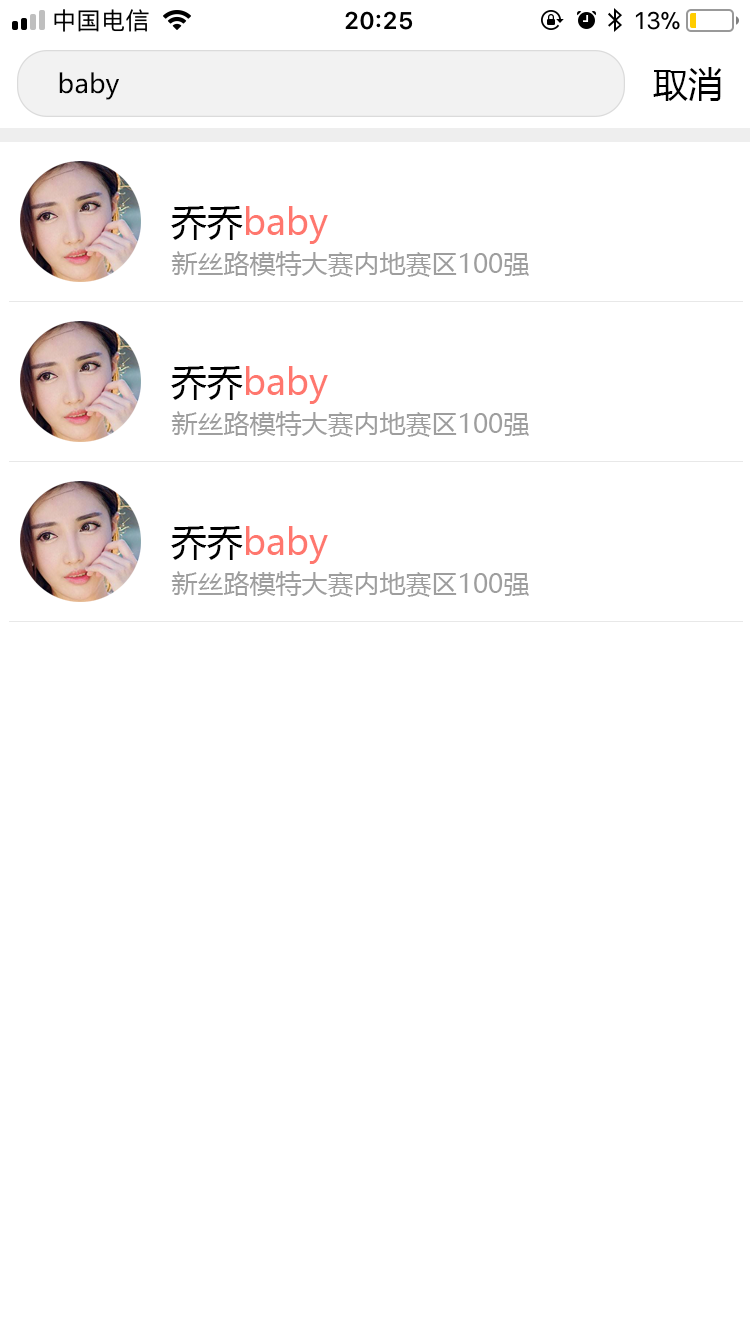
<style>
.page{position:relative;width:750px;height:1334px;background:#ffffff}
.page>*{position:absolute;margin:0}
.t1{font:26px "MicrosoftYaHei";color:#000000}
.t2{font:35px "MicrosoftYaHei";color:#000000}
.t3{font:36px "MicrosoftYaHei";color:#ff776e}
.t4{font:36px "MicrosoftYaHei";color:#000000}
.t5{font:26px "MicrosoftYaHei";color:#9e9e9e}
</style>
<div class="page">
<p class="t1" style="left:59px;top:72px;width:60px;height:28px">baby</p>
<p class="t2" style="left:653px;top:67px;width:69px;height:34px">取消</p>
<p class="t3" style="left:171px;top:206px;width:157px;height:38px"><span class="t4">乔乔</span>baby</p>
<p class="t5" style="left:171px;top:251px;width:358px;height:26px">新丝路模特大赛内地赛区100强</p>
<p class="t3" style="left:171px;top:366px;width:157px;height:38px"><span class="t4">乔乔</span>baby</p>
<p class="t5" style="left:171px;top:411px;width:358px;height:26px">新丝路模特大赛内地赛区100强</p>
<p class="t3" style="left:171px;top:526px;width:157px;height:38px"><span class="t4">乔乔</span>baby</p>
<p class="t5" style="left:171px;top:571px;width:358px;height:26px">新丝路模特大赛内地赛区100强</p>
</div>
